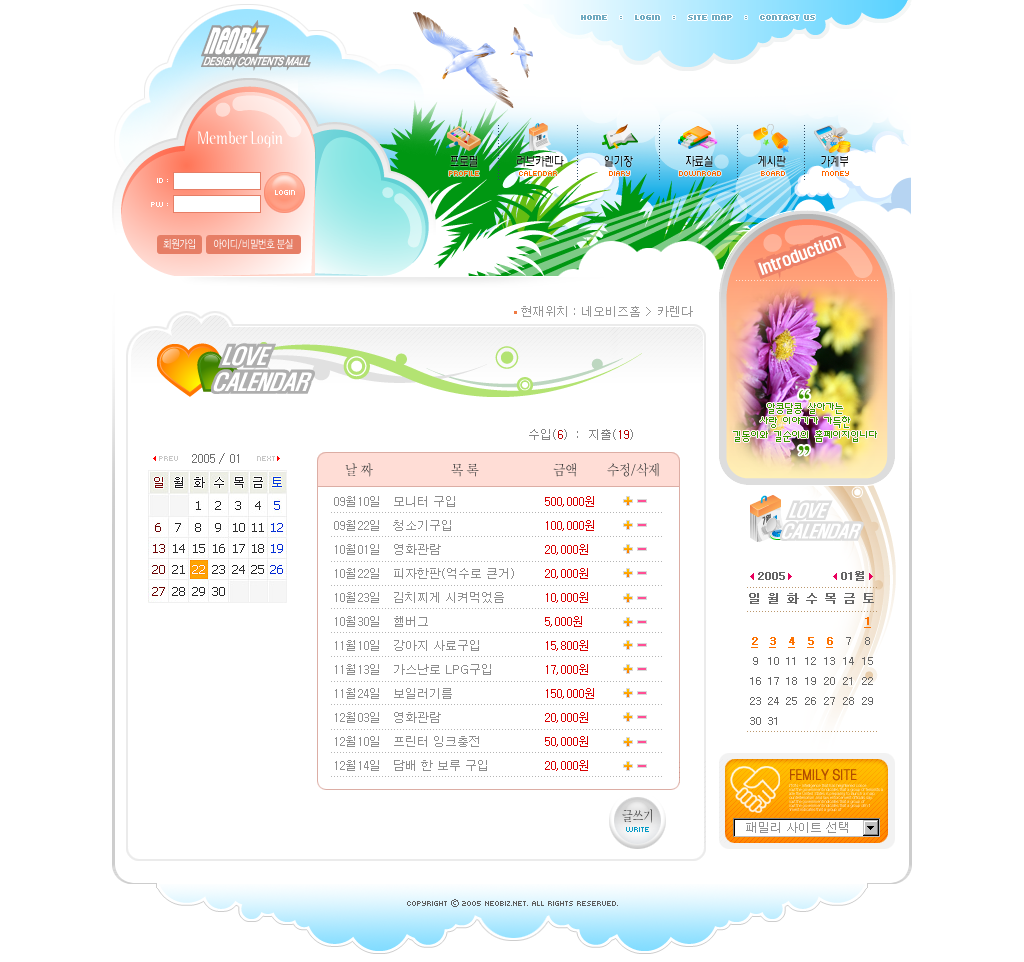
<style>
.page{position:relative;width:1024px;height:962px;background:#ffffff}
.page>*{position:absolute;margin:0}
.t1{font:8px "Kroeger0555";color:#6fabc2;font-weight:bold}
.t2{font:18px "BinaryITCTTLight";color:#ffffff;scale:0.8 1}
.t3{font:13px "H2wulL";letter-spacing:-0.025em;color:#000000;scale:0.75 1}
.t4{font:8px "Kroeger0555";color:#ff6600}
.t5{font:8px/24px "Kroeger0555";color:#ffffff}
.t6{font:8px "Kroeger0555";color:#ffffff}
.t7{font:11px "YDIWebDotum";color:#ffffff;scale:0.8 1}
.t8{font:12px "Dotum";color:#979797}
.t9{font:36px/14px "YDIWebBatan";color:#3b9400}
.t10{font:12px/14px "Á¤9";color:#359700}
.t11{font:12px "Dotum";color:#848484}
.t12{font:12px "Dotum";color:#ba0404}
.t13{font:12px "Dotum";color:#707070}
.t14{font:14px "YDIWebBatan";color:#3c3c3c;scale:0.9 1}
.t15{font:12px/24px "Dotum";color:#8d8d8d}
.t16{font:12px/24px "Dotum";color:#d60000}
.t17{font:14px "YDIWebDotum";color:#b24c00;font-weight:bold;scale:0.83 1}
.t18{font:14px "YDIWebBatan";color:#393939;scale:0.8 1}
.t19{font:12px "Dotum";color:#919191}
.t20{font:8px "Kroeger0555";color:#059ac5}
.t21{font:8px "Kroeger0555";color:#5d5d5d}
.t22{font:8px "YDIWebDotum";color:#5d5d5d}
</style>
<div class="page">
<p class="t1" style="left:581px;top:15px;width:234px;height:5px">Home   :   login   :   Site map   :   Contact us</p>
<p class="t2" style="left:197px;top:131px;width:86px;height:17px">Member Login</p>
<p class="t3" style="left:450px;top:155px;width:398px;height:13px">프로필             러브카렌다              일기장                  자료실               게시판            가계부</p>
<p class="t4" style="left:449px;top:171px;width:400px;height:5px">profile             calendar                 diary                downroad             board            money</p>
<p class="t5" style="left:151px;top:178px;width:17px;height:29px;text-align:right">id :<br>pw :</p>
<p class="t6" style="left:275px;top:190px;width:20px;height:5px">login</p>
<p class="t7" style="left:163px;top:239px;width:130px;height:10px">회원가입        아이디/비밀번호 분실</p>
<p class="t8" style="left:521px;top:306px;width:172px;height:11px">현재위치 : 네오비즈홈 &gt; 카렌다</p>
<p class="t9" style="left:798px;top:390px;width:12px;height:65px;text-align:center">“<br><br><br><br>”</p>
<p class="t10" style="left:733px;top:403px;width:144px;height:39px;text-align:center">알콩달콩 살아가는 <br>사랑 이야기가 가득한<br>길동이와 길순이의 홈페이지입니다</p>
<p class="t11" style="left:529px;top:429px;width:104px;height:11px">수입(<span class="t12">6</span>)  :  지출(<span class="t12">19</span>)</p>
<p class="t13" style="left:192px;top:453px;width:47px;height:11px">2005 / 01</p>
<p class="t14" style="left:345px;top:463px;width:314px;height:14px">날 짜                     목 록                    금액        수정/삭제</p>
<p class="t15" style="left:334px;top:496px;width:180px;height:275px">09월10일   모니터 구입<br>09월22일   청소기구입<br>10월01일   영화관람<br>10월22일   피자한판(억수로 큰거)<br>10월23일   김치찌게 시켜먹었음<br>10월30일   햄버그<br>11월10일   강아지 사료구입<br>11월13일   가스난로 LPG구입 <br>11월24일   보일러기름<br>12월03일   영화관람<br>12월10일   프린터 잉크충전<br>12월14일   담배 한 보루 구입</p>
<p class="t16" style="left:545px;top:496px;width:49px;height:275px">500,000원<br>100,000원<br>20,000원<br>20,000원<br>10,000원<br>5,000원<br>15,800원<br>17,000원<br>150,000원<br>20,000원<br>50,000원<br>20,000원</p>
<p class="t17" style="left:790px;top:768px;width:67px;height:13px">FEMILY SITE</p>
<p class="t18" style="left:622px;top:809px;width:30px;height:14px">글쓰기</p>
<p class="t19" style="left:746px;top:822px;width:102px;height:11px">패밀리 사이트 선택</p>
<p class="t20" style="left:626px;top:827px;width:23px;height:5px">write</p>
<p class="t21" style="left:407px;top:899px;width:211px;height:8px">Copyright <span class="t22">ⓒ</span> 2005 NEOBIZ.NET. All rights reserved.</p>
</div>
